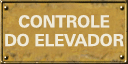
<style>
.page{position:relative;width:128px;height:64px}
.page>*{position:absolute;margin:0}
.t1{font:16.5px/18.7px "UniversNextPro-Bold";letter-spacing:-0.01em;color:#efead8;text-transform:uppercase}
</style>
<div class="page">
<p class="t1" style="left:5px;top:15px;width:119px;height:32px;text-align:center">controle<br>do elevador</p>
</div>
